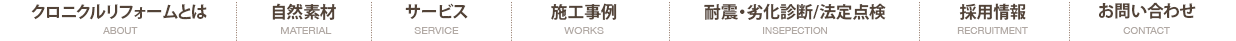
<style>
.page{position:relative;width:1236px;height:41px;background:#ffffff}
.page>*{position:absolute;margin:0}
.t1{font:16.7px "KozGoPr6N-Bold";color:#534337}
.t2{font:10px "HelveticaNeue";color:#b1a9a4}
.t3{font:10px "HelveticaNeue";color:#b1a9a4;text-transform:uppercase;scale:1.07 1}
</style>
<div class="page">
<p class="t1" style="left:31px;top:4px;width:176px;height:16px">クロニクルリフォームとは</p>
<p class="t1" style="left:272px;top:3px;width:64px;height:17px">自然素材</p>
<p class="t1" style="left:405px;top:3px;width:63px;height:16px">サービス</p>
<p class="t1" style="left:551px;top:3px;width:66px;height:17px">施工事例</p>
<p class="t1" style="left:704px;top:3px;width:182px;height:17px">耐震・劣化診断/法定点検</p>
<p class="t1" style="left:959px;top:3px;width:67px;height:17px">採用情報</p>
<p class="t1" style="left:1099px;top:2px;width:97px;height:17px">お問い合わせ</p>
<p class="t2" style="left:103px;top:27px;width:35px;height:7px">ABOUT</p>
<p class="t3" style="left:281px;top:27px;width:51px;height:7px">Material</p>
<p class="t3" style="left:414px;top:27px;width:45px;height:7px">service</p>
<p class="t3" style="left:564px;top:27px;width:40px;height:7px">works</p>
<p class="t2" style="left:763px;top:27px;width:64px;height:7px">INSEPECTION</p>
<p class="t2" style="left:957px;top:27px;width:71px;height:7px">RECRUITMENT</p>
<p class="t2" style="left:1123px;top:27px;width:47px;height:7px">CONTACT</p>
</div>
